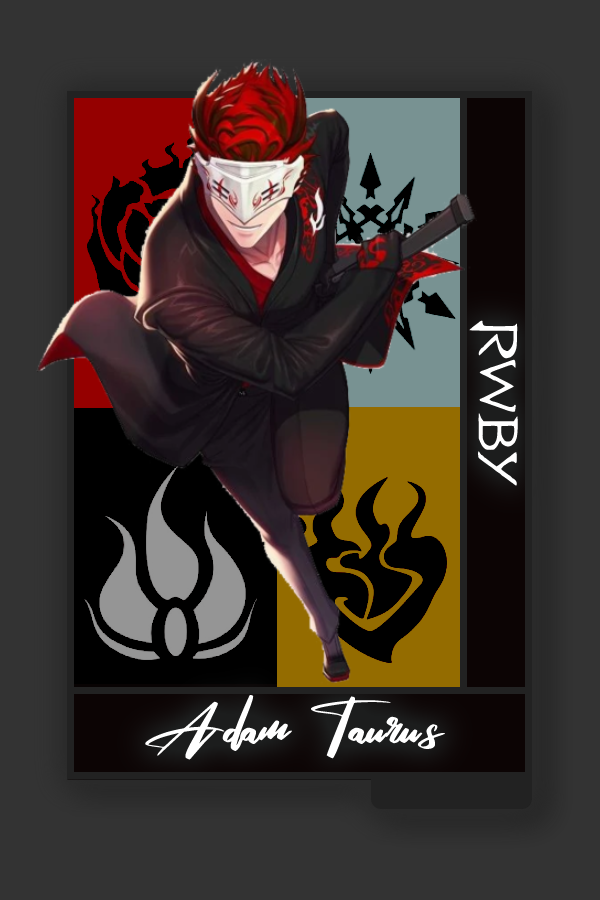
<style>
.page{position:relative;width:600px;height:900px;background:#333333}
.page>*{position:absolute;margin:0}
.t1{font:61.3px "RWBY_Style";color:#ffffff;scale:1.25 1}
.t2{font:75px "RosegaFREE";color:#ffffff}
</style>
<div class="page">
<p class="t1" style="left:469px;top:320px;width:49px;height:166px;rotate:90deg">RWBY</p>
<p class="t2" style="left:144px;top:694px;width:301px;height:66px">Adam Taurus</p>
</div>
